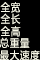
<style>
.page{position:relative;width:40px;height:60px;background:#000000}
.page>*{position:absolute;margin:0}
.t1{font:11px "MicrosoftYaHeiSemilight";color:#f8f8e8;scale:0.93 1}
.t2{font:11px/12.4px "MicrosoftYaHeiSemilight";color:#f8f8e8;scale:0.93 1}
</style>
<div class="page">
<p class="t1" style="left:0px;top:2px;width:20px;height:11px">全宽</p>
<p class="t2" style="left:0px;top:13px;width:21px;height:24px">全长<br>全高</p>
<p class="t2" style="left:0px;top:37px;width:40px;height:24px">总重量<br>最大速度</p>
</div>
